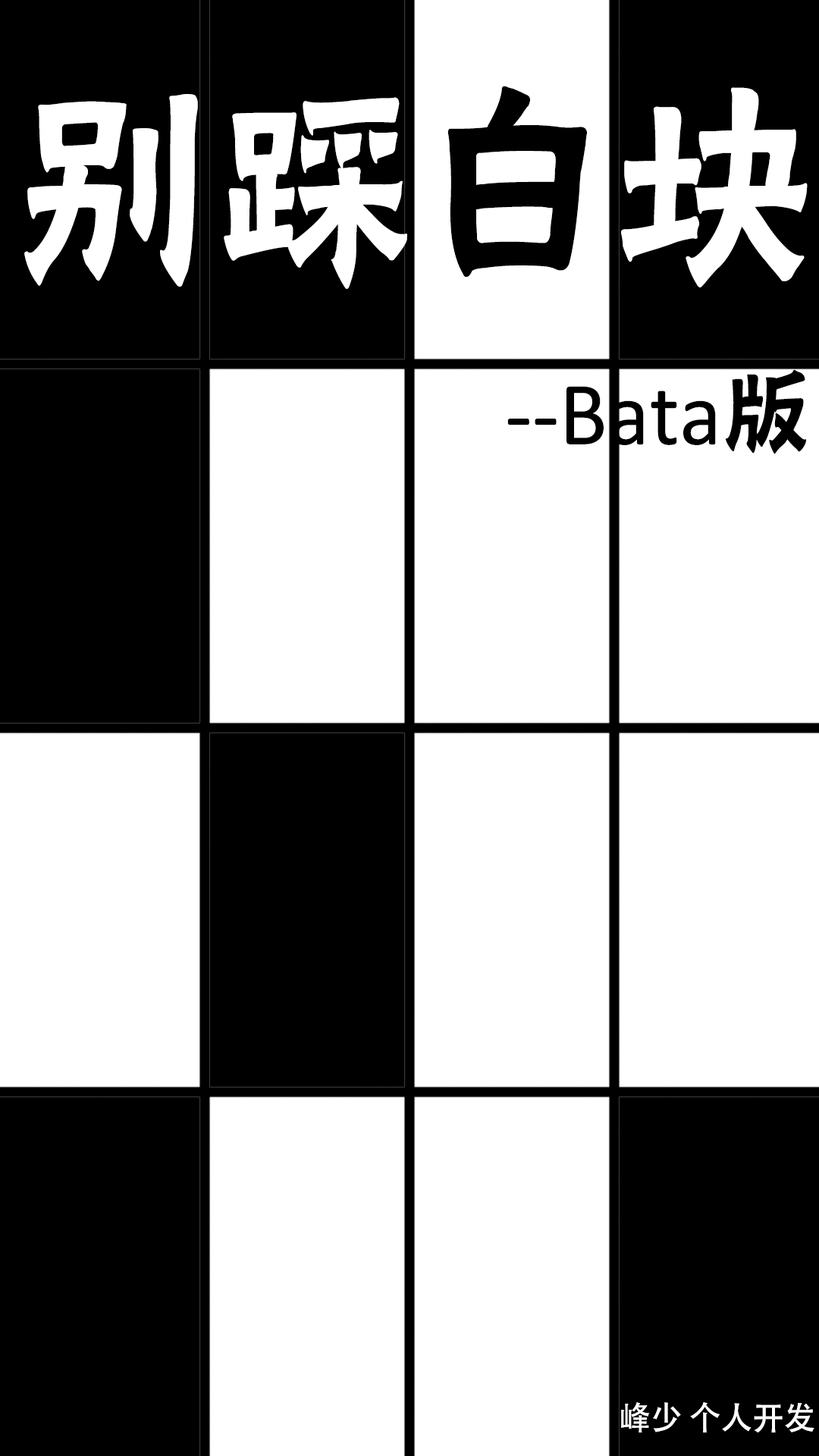
<style>
.page{position:relative;width:819px;height:1456px;background:#ffffff}
.page>*{position:absolute;margin:0}
.t1{font:205.7px "FZYHJW--GB1-0";color:#ffffff}
.t2{font:205.7px "FZYHJW--GB1-0";color:#000000}
.t3{font:91.1px "Calibri";color:#000000}
.t4{font:91.1px "FZYHJW--GB1-0";color:#000000}
.t5{font:32.6px "AdobeHeitiStd-Regular";color:#ffffff}
</style>
<div class="page">
<p class="t1" style="left:24px;top:86px;width:784px;height:203px">别踩<span class="t2">白</span>块</p>
<p class="t3" style="left:507px;top:369px;width:299px;height:85px">--Bata<span class="t4">版</span></p>
<p class="t5" style="left:621px;top:1402px;width:193px;height:30px">峰少 个人开发</p>
</div>
